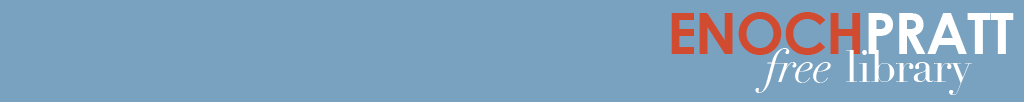
<style>
.page{position:relative;width:1024px;height:102px;background:#79a2c1}
.page>*{position:absolute;margin:0}
.t1{font:57.4px "CenturyGothic-Bold";letter-spacing:-0.025em;color:#d14b30}
.t2{font:57.4px "CenturyGothic-Bold";letter-spacing:-0.025em;color:#ffffff}
.t3{font:44.9px "Didot-Italic";letter-spacing:-0.025em;color:#ffffff}
.t4{font:44.9px "Didot";letter-spacing:-0.025em;color:#ffffff}
</style>
<div class="page">
<p class="t1" style="left:671px;top:12px;width:343px;height:43px">ENOCH<span class="t2">PRATT</span></p>
<p class="t3" style="left:755px;top:48px;width:76px;height:45px">free</p>
<p class="t4" style="left:846px;top:50px;width:126px;height:45px">library</p>
</div>
